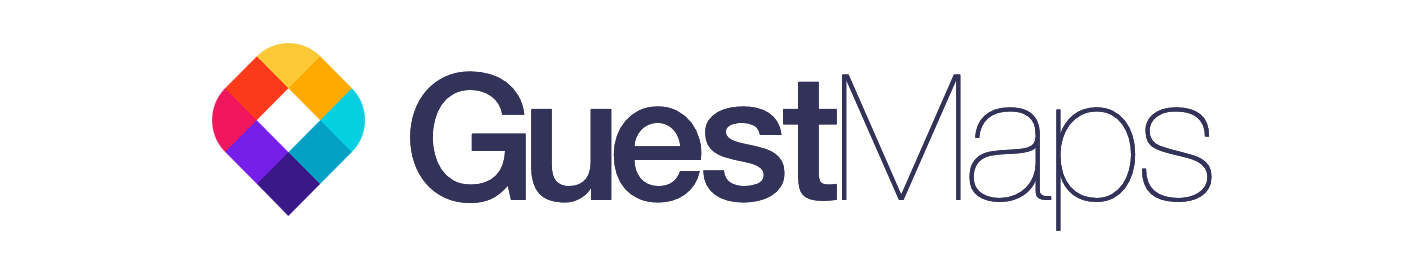
<style>
.page{position:relative;width:1415px;height:259px;background:#ffffff}
.page>*{position:absolute;margin:0}
.t1{font:175px "HelveticaNeue-UltraLight";letter-spacing:-0.02em;color:#333359}
.t2{font:175px "HelveticaNeue-Medium";letter-spacing:-0.08em;color:#333359}
.t3{font:175px "HelveticaNeue-Medium";letter-spacing:-0.04em;color:#333359}
</style>
<div class="page">
<p class="t1" style="left:410px;top:71px;width:802px;height:160px"><span class="t2">Gu</span><span class="t3">est</span>Maps</p>
</div>
